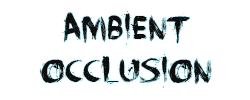
<style>
.page{position:relative;width:250px;height:100px;background:#ffffff}
.page>*{position:absolute;margin:0}
.t1{font:36px "FaceYourFears";color:#0e0e0e}
</style>
<div class="page">
<p class="t1" style="left:40px;top:11px;width:172px;height:77px;text-align:center">Ambient<br>Occlusion</p>
</div>
